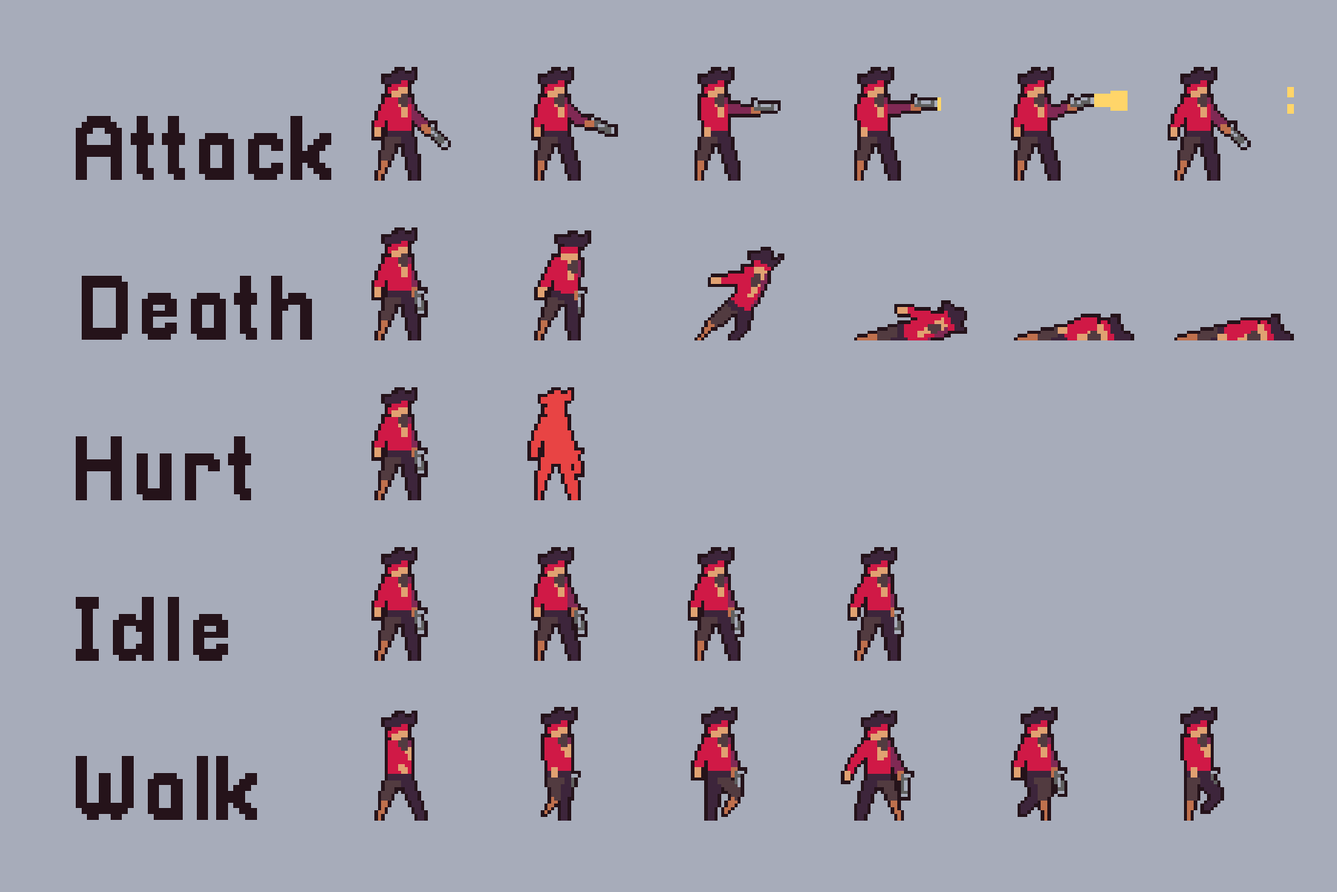
<style>
.page{position:relative;width:1337px;height:892px;background:#a7acba}
.page>*{position:absolute;margin:0}
.t1{font:92.9px "Pixellari";letter-spacing:0.025em;color:#25131a}
</style>
<div class="page">
<p class="t1" style="left:76px;top:116px;width:255px;height:64px">Attack</p>
<p class="t1" style="left:82px;top:276px;width:230px;height:64px">Death</p>
<p class="t1" style="left:76px;top:436px;width:175px;height:64px">Hurt</p>
<p class="t1" style="left:76px;top:597px;width:152px;height:64px">Idle</p>
<p class="t1" style="left:76px;top:756px;width:181px;height:64px">Walk</p>
</div>
